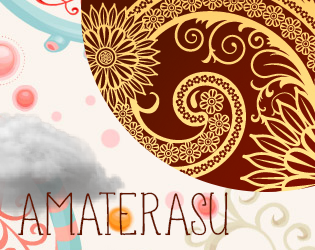
<style>
.page{position:relative;width:315px;height:250px}
.page>*{position:absolute;margin:0}
.t1{font:46.2px "KGSomebodyThatIUsedtoKnow";color:#611500;scale:1.18 1}
</style>
<div class="page">
<p class="t1" style="left:18px;top:192px;width:211px;height:44px">AMATERASU</p>
</div>
